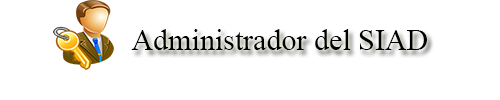
<style>
.page{position:relative;width:500px;height:100px;background:#ffffff}
.page>*{position:absolute;margin:0}
.t1{font:30px "TimesNewRomanPSMT";color:#000000}
</style>
<div class="page">
<p class="t1" style="left:131px;top:29px;width:296px;height:21px">Administrador del SIAD</p>
</div>
